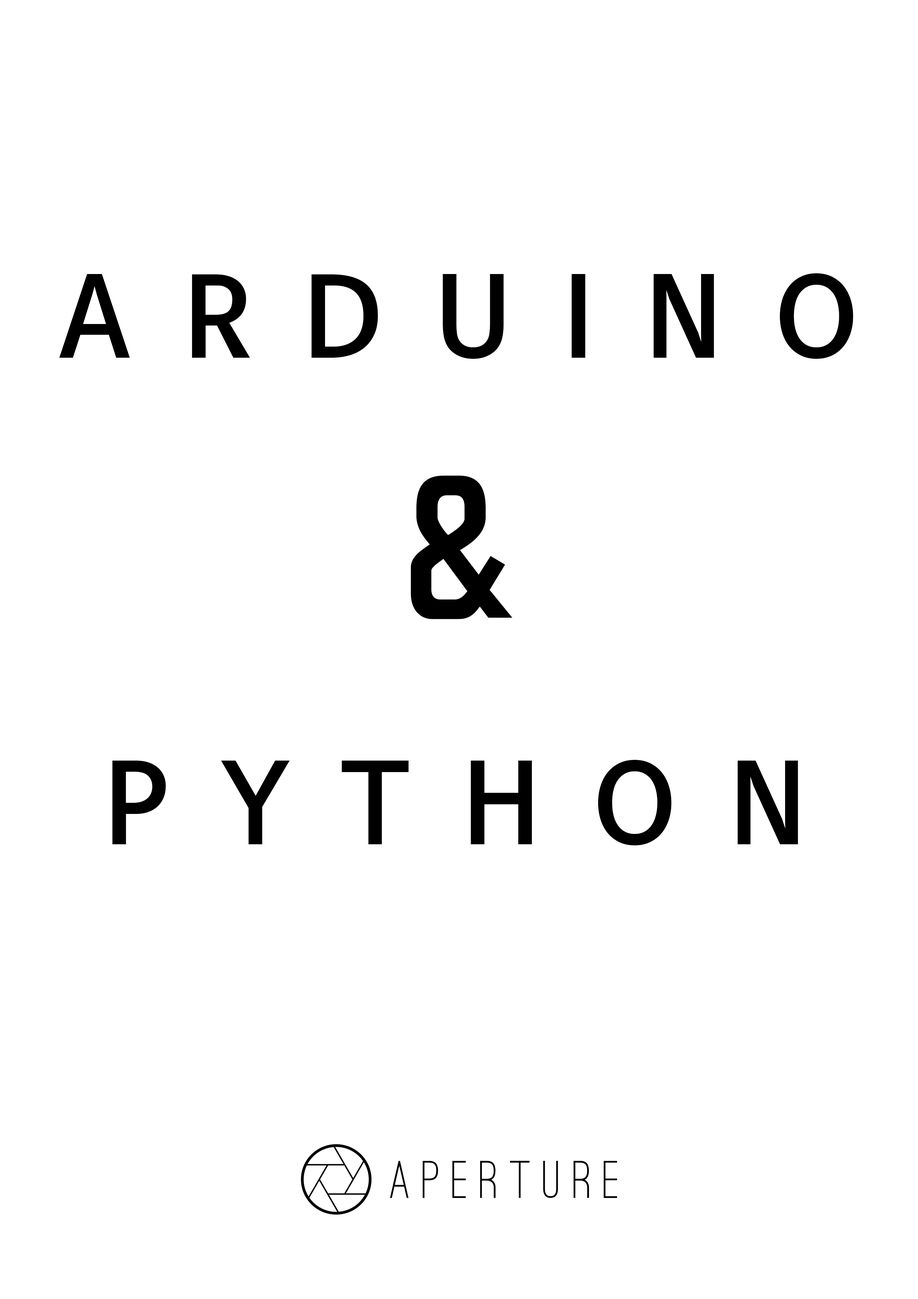
<style>
.page{position:relative;width:918px;height:1299px;background:#ffffff}
.page>*{position:absolute;margin:0}
.t1{font:108px "NanumBarunGothicBold";letter-spacing:0.5em;color:#000000}
.t2{font:154.3px "BMDoHyeon-OTF";letter-spacing:0.5em;color:#000000}
</style>
<div class="page">
<p class="t1" style="left:59px;top:273px;width:794px;height:86px">ARDUINO</p>
<p class="t2" style="left:411px;top:475px;width:102px;height:144px">&amp;</p>
<p class="t1" style="left:112px;top:760px;width:686px;height:85px">PYTHON</p>
</div>
